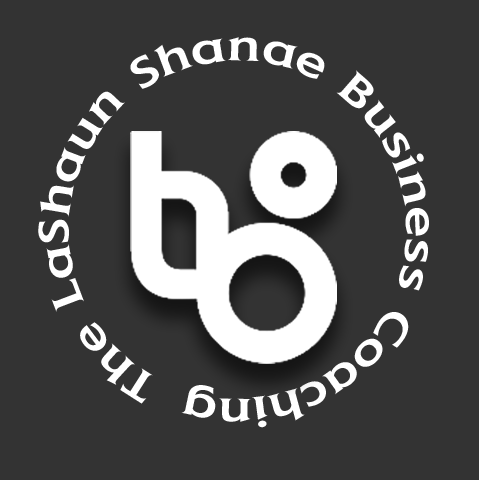
<style>
.page{position:relative;width:479px;height:480px;background:#333333}
.page>*{position:absolute;margin:0}
.t1{font:38.3px/179.2px "Empire";color:#ffffff;scale:1.28 1}
</style>
<div class="page">
<p class="t1" style="left:38px;top:37px;width:391px;height:391px;text-align:center">The LaShaun Shanae Business Coaching</p>
</div>
